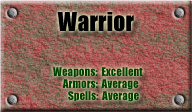
<style>
.page{position:relative;width:192px;height:112px}
.page>*{position:absolute;margin:0}
.t1{font:24px "Impact";color:#000000}
.t2{font:11px "Impact";color:#004100}
</style>
<div class="page">
<p class="t1" style="left:57px;top:12px;width:77px;height:20px">Warrior</p>
<p class="t2" style="left:53px;top:67px;width:90px;height:10px">Weapons:  Excellent</p>
<p class="t2" style="left:62px;top:79px;width:77px;height:11px">Armors:  Average</p>
<p class="t2" style="left:68px;top:91px;width:71px;height:11px">Spells:  Average</p>
</div>
